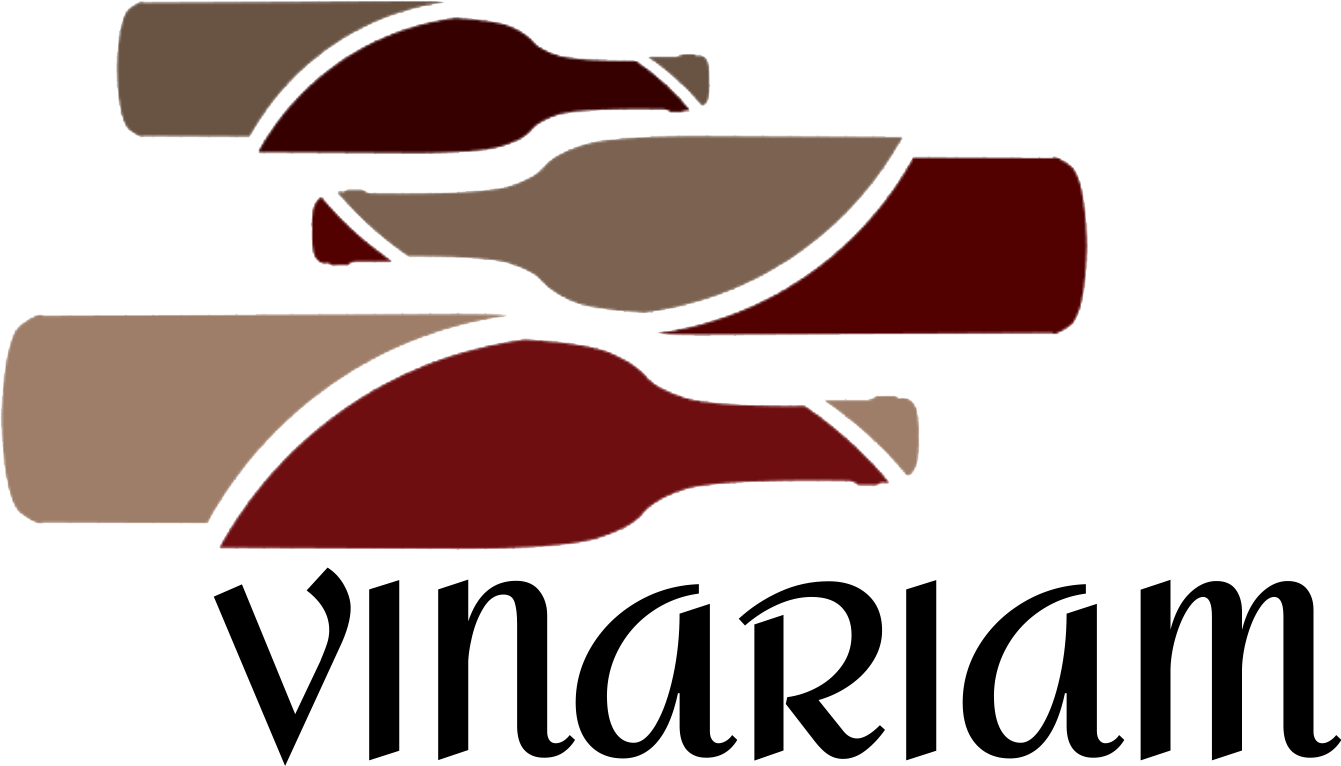
<style>
.page{position:relative;width:1341px;height:766px;background:#ffffff}
.page>*{position:absolute;margin:0}
.t1{font:240px "Amita-Bold";color:#000000}
</style>
<div class="page">
<p class="t1" style="left:213px;top:567px;width:1129px;height:199px">VINARIAM</p>
</div>
